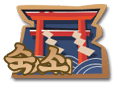
<style>
.page{position:relative;width:115px;height:89px;background:#ffffff}
.page>*{position:absolute;margin:0}
.t1{font:33.4px "SDKukdetopokki-bBd";letter-spacing:0.08em;color:#daae7d}
</style>
<div class="page">
<p class="t1" style="left:5px;top:44px;width:64px;height:30px">숙소</p>
</div>
